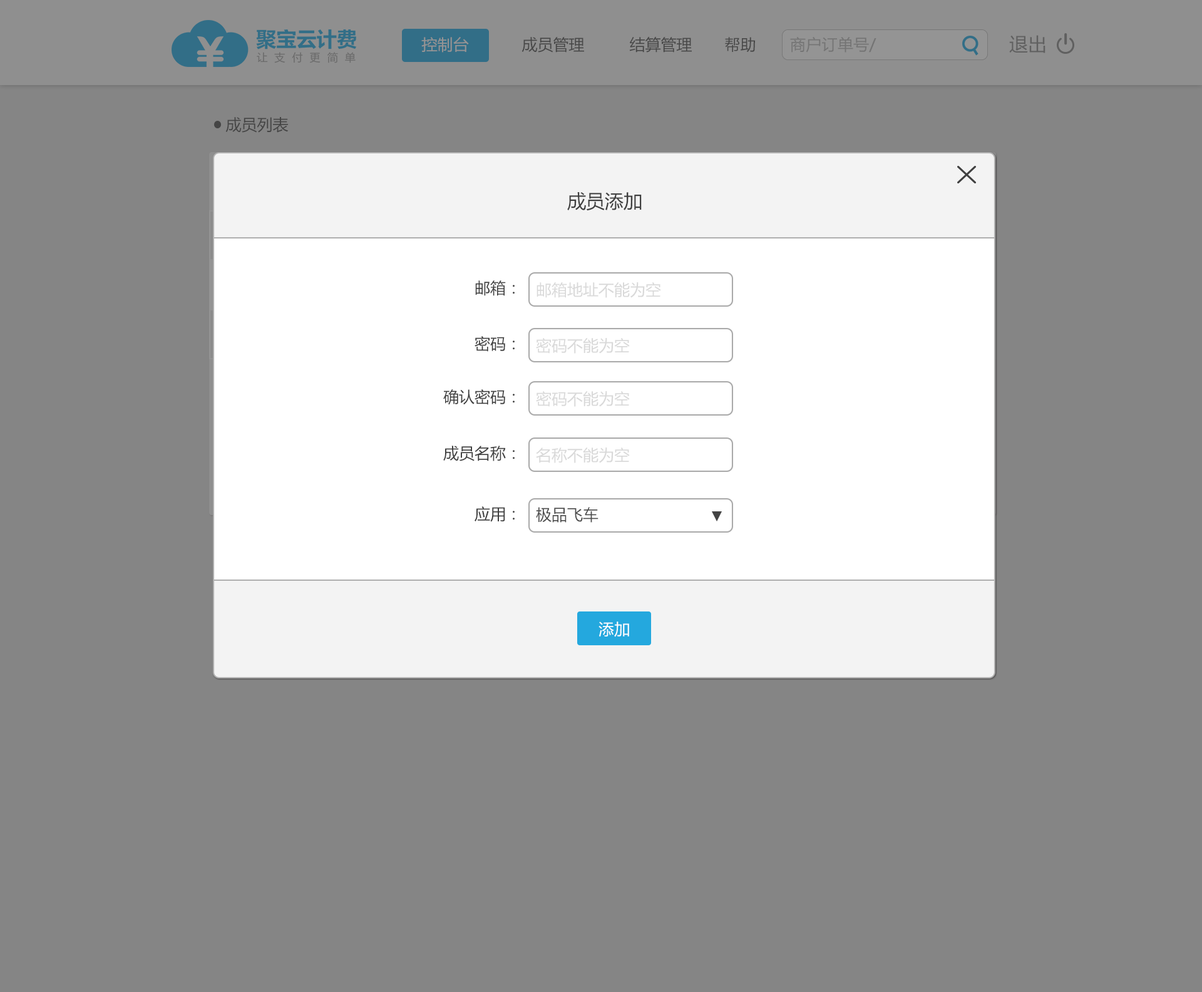
<style>
.page{position:relative;width:1202px;height:992px;background:#858585}
.page>*{position:absolute;margin:0}
.t1{font:15.6px "MicrosoftYaHei";color:#949494}
.t2{font:15.6px "MicrosoftYaHei";color:#3f3f3f}
.t3{font:15.6px "MicrosoftYaHei";color:#747474}
.t4{font:18.8px "MicrosoftYaHei";color:#606060}
.t5{font:15.6px "MicrosoftYaHei";color:#3a3a3a}
.t6{font:18.8px "MicrosoftYaHei";color:#3f3f3f}
.t7{font:15.6px "MicrosoftYaHei";color:#d9d9d9}
.t8{font:15.6px "MicrosoftYaHei";color:#4d4d4d}
.t9{font:15.6px "MicrosoftYaHei";color:#ffffff}
</style>
<div class="page">
<p class="t1" style="left:421px;top:37px;width:48px;height:16px">控制台</p>
<p class="t2" style="left:521px;top:37px;width:63px;height:16px">成员管理</p>
<p class="t2" style="left:629px;top:37px;width:63px;height:16px">结算管理</p>
<p class="t2" style="left:725px;top:37px;width:30px;height:15px">帮助</p>
<p class="t3" style="left:790px;top:37px;width:86px;height:16px">商户订单号/ 聚宝订单号/ 付款方名称</p>
<p class="t4" style="left:1009px;top:35px;width:36px;height:18px">退出</p>
<p class="t5" style="left:225px;top:117px;width:64px;height:16px">成员列表</p>
<p class="t6" style="left:567px;top:192px;width:75px;height:19px">成员添加</p>
<p class="t2" style="left:475px;top:280px;width:40px;height:16px">邮箱：</p>
<p class="t7" style="left:536px;top:282px;width:125px;height:16px">邮箱地址不能为空</p>
<p class="t2" style="left:474px;top:336px;width:41px;height:16px">密码：</p>
<p class="t7" style="left:536px;top:338px;width:94px;height:16px">密码不能为空</p>
<p class="t2" style="left:443px;top:389px;width:72px;height:16px">确认密码：</p>
<p class="t7" style="left:536px;top:391px;width:94px;height:16px">密码不能为空</p>
<p class="t2" style="left:443px;top:446px;width:72px;height:15px">成员名称：</p>
<p class="t7" style="left:536px;top:448px;width:94px;height:15px">名称不能为空</p>
<p class="t2" style="left:474px;top:506px;width:41px;height:16px">应用：</p>
<p class="t8" style="left:536px;top:507px;width:62px;height:16px">极品飞车</p>
<p class="t9" style="left:598px;top:622px;width:31px;height:15px">添加</p>
</div>
